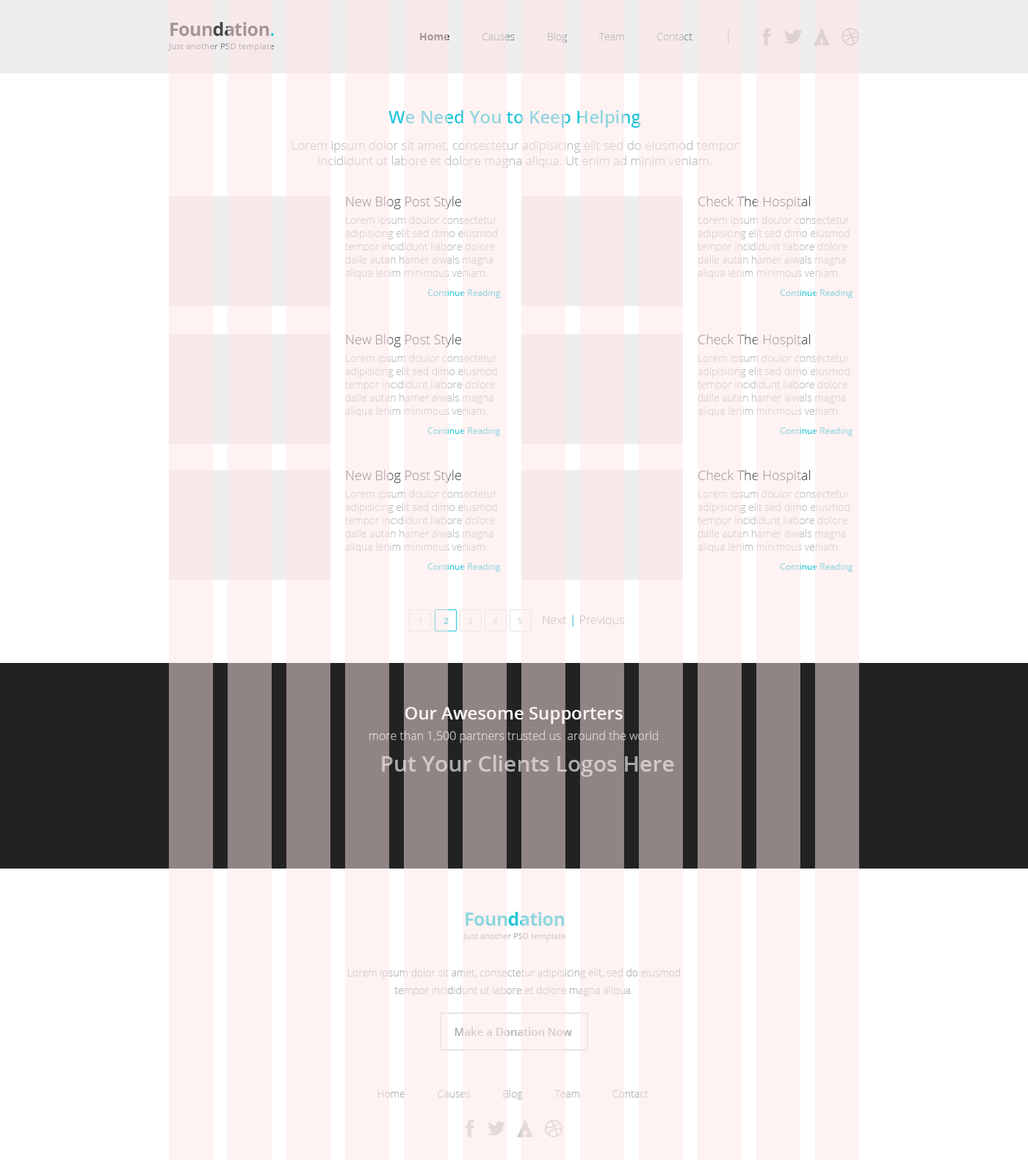
<style>
.page{position:relative;width:1028px;height:1160px;background:#ffffff}
.page>*{position:absolute;margin:0}
.t1{font:8.4px/13.2px "OpenSans";letter-spacing:0.015em;color:#a29595}
.t2{font:18.4px/22px "OpenSans-Bold";letter-spacing:-0.025em;color:#a29595}
.t3{font:10.3px "OpenSans-Light";color:#7e8a98}
.t4{font:10.3px "OpenSans-Bold";color:#444444}
.t5{font:14.7px "OpenSans-Light";color:#b0b0b0}
.t6{font:12.5px/26.4px "OpenSans-Light"}
.t7{font:17.6px "OpenSans-Semibold"}
.t8{font:12.5px/15.4px "OpenSans-Light"}
.t9{font:10.3px/13.2px "OpenSans-Light"}
.t10{font:13.2px "OpenSans-Light"}
.t11{font:10.3px/17.6px "OpenSans-Light"}
.t12{font:8.8px/19.1px "OpenSans"}
.t13{font:8.8px "OpenSans-Bold";color:#e3e3e3}
.t14{font:8.8px "OpenSans-Bold";color:#90d6df}
.t15{font:11.7px "OpenSans-Light";color:#c4b7b7}
.t16{font:11.7px "OpenSans-Semibold";color:#c4b7b7}
.t17{font:11.7px/21.1px "OpenSans-Light";color:#bbbbbb}
.t18{font:17.6px/21.1px "OpenSans-Semibold";color:#ffffff}
.t19{font:22px "OpenSans-Semibold";color:#d4c7c7}
.t20{font:8.1px/13.2px "OpenSans";letter-spacing:0.015em;color:#90d6df}
.t21{font:18.4px/22px "OpenSans-Bold";letter-spacing:-0.025em;color:#90d6df}
.t22{font:10.3px/17.6px "OpenSans-Light";color:#d8cbcb}
.t23{font:11px "OpenSans-Semibold";color:#d8cbcb}
.t24{font:10.3px "OpenSans-Light"}
</style>
<div class="page">
<p class="t1" style="left:168px;top:22px;width:107px;height:29px"><span class="t2">Foundation</span><span class="t2">.<br></span>Just another PSD template</p>
<p class="t3" style="left:420px;top:29px;width:309px;height:15px"><span class="t4">Home            </span>Causes            Blog            Team            Contact            <span class="t5">|</span></p>
<p class="t6" style="left:292px;top:110px;width:447px;height:58px;text-align:center"><span class="t7">We Need You to Keep Helping<br></span>Lorem ipsum dolor sit amet, consectetur adipisicing elit sed do eiusmod tempor <span class="t8">incididunt ut labore et dolore magna aliqua. Ut enim ad minim veniam.</span></p>
<p class="t9" style="left:345px;top:196px;width:156px;height:102px"><span class="t10">New Blog Post Style<br></span><span class="t11">Lorem ipsum doulor consectetur </span>adipisicing elit sed dimo eiusmod tempor incididunt liabore dolore<br>dalle autan hamer aiwals magna aliqua lenim minimous veniam.<br>                                    <span class="t12">Continue Reading</span></p>
<p class="t9" style="left:698px;top:196px;width:155px;height:102px"><span class="t10">Check The Hospital<br></span><span class="t11">Lorem ipsum doulor consectetur </span>adipisicing elit sed dimo eiusmod tempor incididunt liabore dolore<br>dalle autan hamer aiwals magna aliqua lenim minimous veniam.<br>                                    <span class="t12">Continue Reading</span></p>
<p class="t9" style="left:345px;top:334px;width:156px;height:102px"><span class="t10">New Blog Post Style<br></span><span class="t11">Lorem ipsum doulor consectetur </span>adipisicing elit sed dimo eiusmod tempor incididunt liabore dolore<br>dalle autan hamer aiwals magna aliqua lenim minimous veniam.<br>                                    <span class="t12">Continue Reading</span></p>
<p class="t9" style="left:698px;top:334px;width:155px;height:102px"><span class="t10">Check The Hospital<br></span><span class="t11">Lorem ipsum doulor consectetur </span>adipisicing elit sed dimo eiusmod tempor incididunt liabore dolore<br>dalle autan hamer aiwals magna aliqua lenim minimous veniam.<br>                                    <span class="t12">Continue Reading</span></p>
<p class="t9" style="left:345px;top:470px;width:156px;height:102px"><span class="t10">New Blog Post Style<br></span><span class="t11">Lorem ipsum doulor consectetur </span>adipisicing elit sed dimo eiusmod tempor incididunt liabore dolore<br>dalle autan hamer aiwals magna aliqua lenim minimous veniam.<br>                                    <span class="t12">Continue Reading</span></p>
<p class="t9" style="left:698px;top:470px;width:155px;height:102px"><span class="t10">Check The Hospital<br></span><span class="t11">Lorem ipsum doulor consectetur </span>adipisicing elit sed dimo eiusmod tempor incididunt liabore dolore<br>dalle autan hamer aiwals magna aliqua lenim minimous veniam.<br>                                    <span class="t12">Continue Reading</span></p>
<p class="t13" style="left:418px;top:617px;width:3px;height:7px">1</p>
<p class="t14" style="left:443px;top:617px;width:6px;height:7px">2</p>
<p class="t13" style="left:468px;top:617px;width:5px;height:7px">3</p>
<p class="t13" style="left:493px;top:617px;width:5px;height:7px">4</p>
<p class="t13" style="left:518px;top:617px;width:5px;height:7px">5</p>
<p class="t15" style="left:543px;top:615px;width:81px;height:12px">Next <span class="t16">|</span> Previous</p>
<p class="t17" style="left:369px;top:707px;width:289px;height:36px;text-align:center"><span class="t18">Our Awesome Supporters<br></span>more than 1,500 partners trusted us  around the world</p>
<p class="t19" style="left:382px;top:755px;width:292px;height:22px">Put Your Clients Logos Here</p>
<p class="t20" style="left:463px;top:912px;width:102px;height:29px;text-align:center"><span class="t21">Foundation<br></span>Just another PSD template</p>
<p class="t22" style="left:348px;top:968px;width:332px;height:28px;text-align:center">Lorem ipsum dolor sit amet, consectetur adipisicing elit, sed do eiusmod tempor incididunt ut labore et dolore magna aliqua.</p>
<p class="t23" style="left:454px;top:1027px;width:118px;height:9px">Make a Donation Now</p>
<p class="t24" style="left:377px;top:1090px;width:271px;height:10px">Home            Causes            Blog            Team            Contact</p>
</div>
